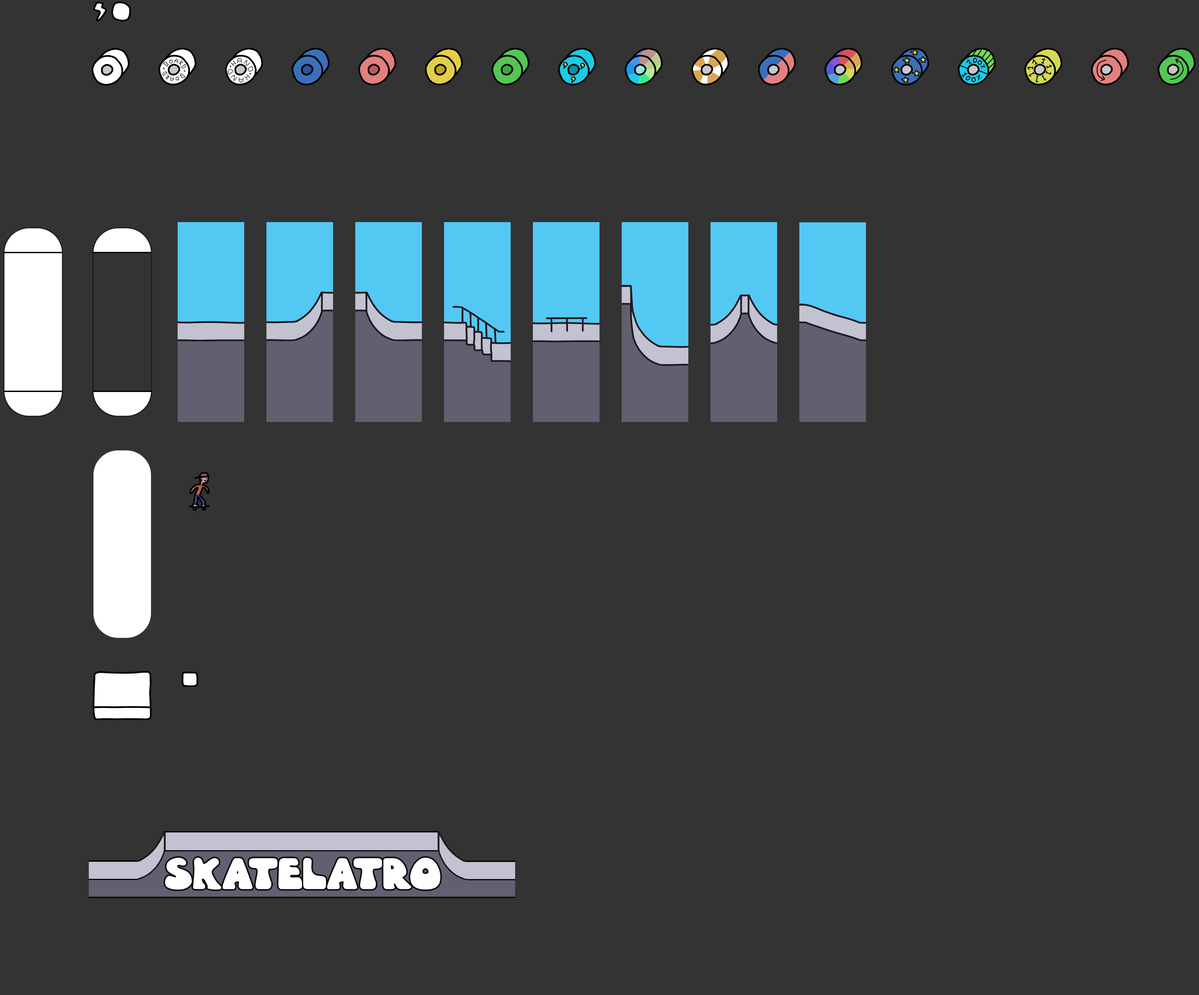
<style>
.page{position:relative;width:1199px;height:995px;background:#333333}
.page>*{position:absolute;margin:0}
.t1{font:33.3px "Wobbles";color:#ffffff}
</style>
<div class="page">
<p class="t1" style="left:165px;top:857px;width:275px;height:32px">Skatelatro</p>
</div>
